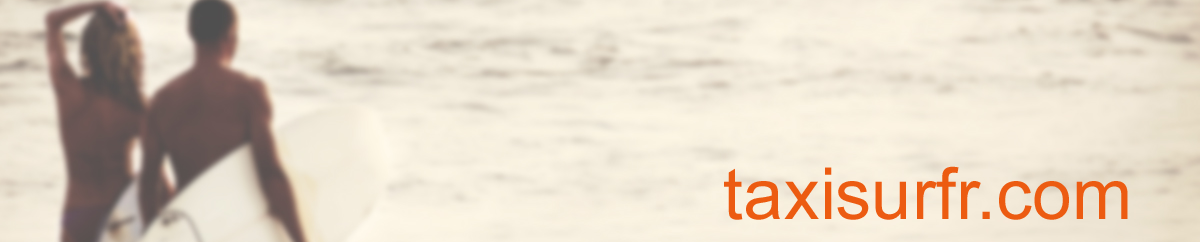
<style>
.page{position:relative;width:1200px;height:242px}
.page>*{position:absolute;margin:0}
.t1{font:72px "ArialMT";color:#ec5b11}
</style>
<div class="page">
<p class="t1" style="left:724px;top:166px;width:404px;height:54px">taxisurfr.com</p>
</div>
